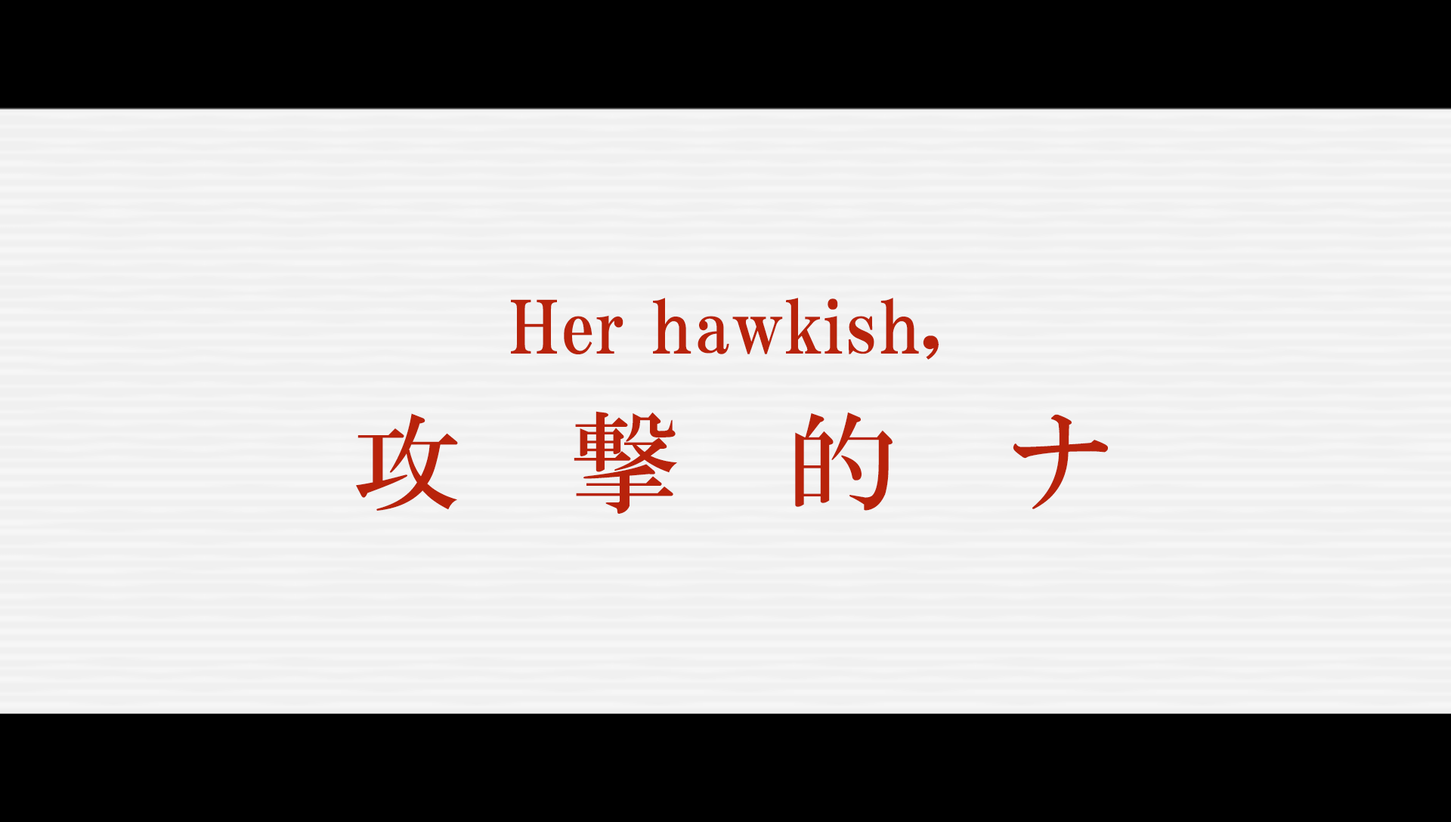
<style>
.page{position:relative;width:1451px;height:822px;background:#f0f0f0}
.page>*{position:absolute;margin:0}
.t1{font:72.5px "HGPMinchoE";letter-spacing:0.025em;color:#b8230b}
.t2{font:107.8px "HGMinchoB";letter-spacing:1.02em;color:#b8230b}
</style>
<div class="page">
<p class="t1" style="left:511px;top:298px;width:427px;height:62px">Her hawkish,</p>
<p class="t2" style="left:356px;top:411px;width:752px;height:103px">攻撃的ナ</p>
</div>
